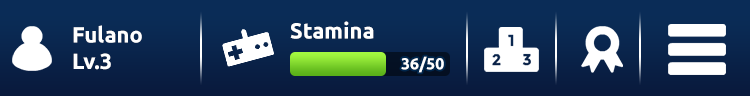
<style>
.page{position:relative;width:750px;height:96px}
.page>*{position:absolute;margin:0}
.t1{font:22px "Ubuntu-Bold";color:#ffffff}
.t2{font:16px "Ubuntu-Bold";color:#ffffff}
</style>
<div class="page">
<p class="t1" style="left:73px;top:25px;width:69px;height:45px;text-align:justify">Fulano<br>Lv.3</p>
<p class="t1" style="left:290px;top:21px;width:84px;height:18px">Stamina</p>
<p class="t2" style="left:401px;top:56px;width:43px;height:17px">36/50</p>
</div>
